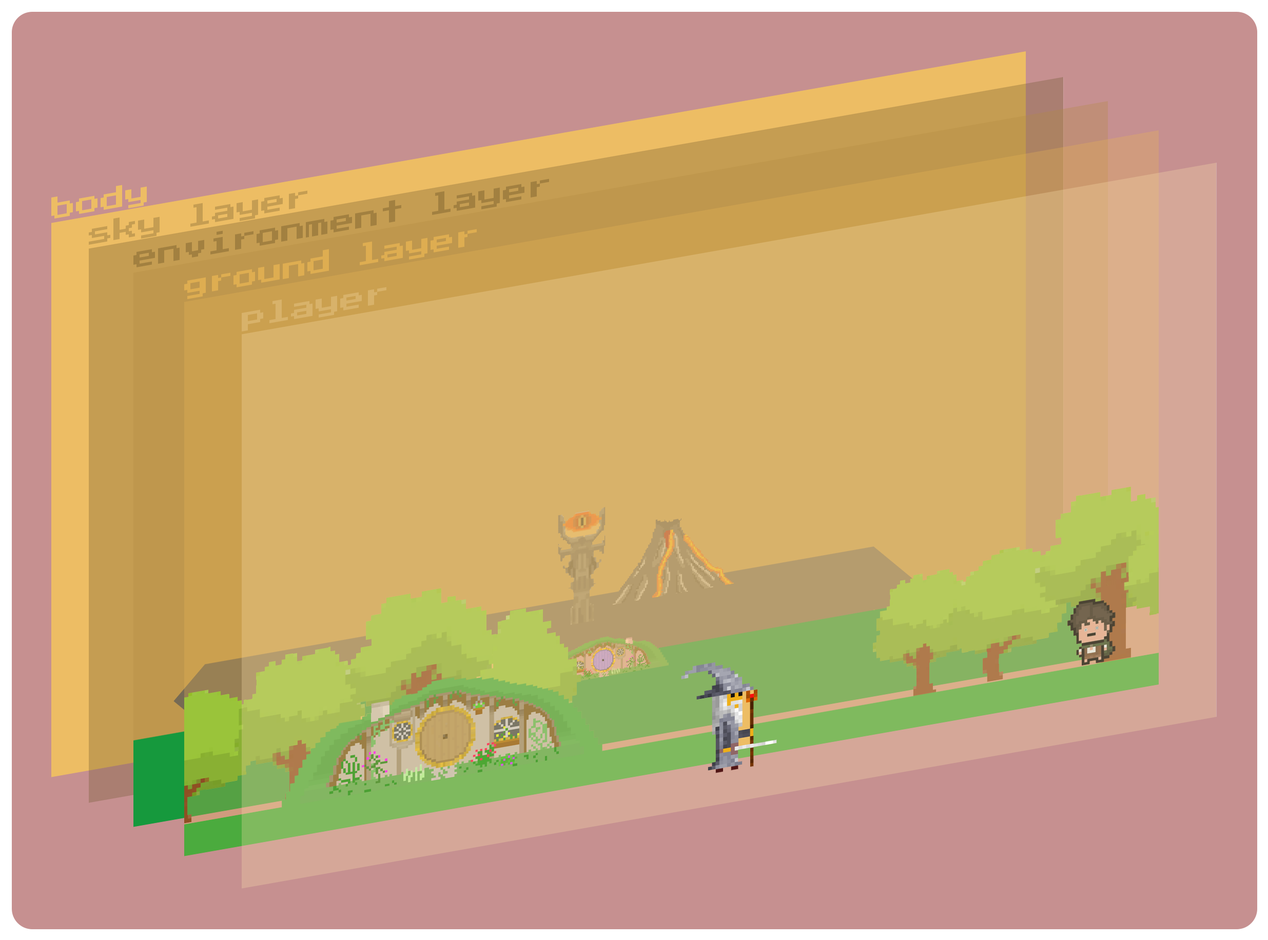
<style>
.page{position:relative;width:1268px;height:940px;background:#c69090}
.page>*{position:absolute;margin:0}
.t1{font:24.6px "PressStart2P-Regular";color:#edbd64}
.t2{font:24.6px "PressStart2P-Regular";color:#a28040}
.t3{font:24.6px "PressStart2P-Regular";color:#dead51}
.t4{font:24.6px "PressStart2P-Regular";color:#d8b26a}
</style>
<div class="page">
<p class="t1" style="left:51px;top:185px;width:96px;height:34px;rotate:-10deg">body</p>
<p class="t2" style="left:133px;top:179px;width:416px;height:88px;rotate:-10deg">environment layer</p>
<p class="t3" style="left:184px;top:229px;width:293px;height:70px;rotate:-10deg">ground layer</p>
<p class="t4" style="left:242px;top:287px;width:144px;height:45px;rotate:-10deg">player</p>
</div>
